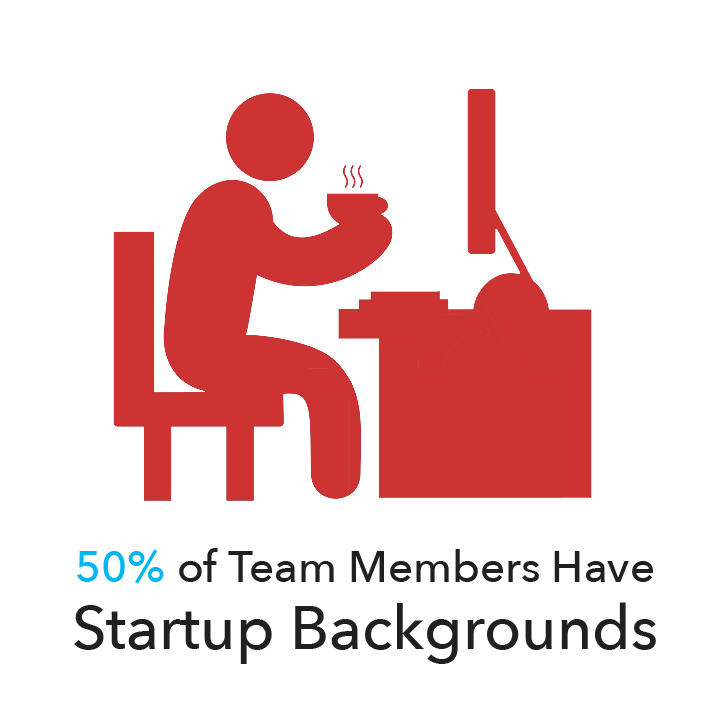
<style>
.page{position:relative;width:720px;height:720px;background:#ffffff}
.page>*{position:absolute;margin:0}
.t1{font:44px "AvenirNext-Medium";color:#202020}
.t2{font:44px "AvenirNext-Medium";color:#00b6ef}
.t3{font:61px "AvenirNext-Medium";color:#202020}
</style>
<div class="page">
<p class="t1" style="left:77px;top:548px;width:576px;height:36px"><span class="t2">50%</span> of Team Members Have</p>
<p class="t3" style="left:74px;top:602px;width:582px;height:62px">Startup Backgrounds</p>
</div>
